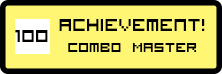
<style>
.page{position:relative;width:222px;height:74px;background:#fff774}
.page>*{position:absolute;margin:0}
.t1{font:23px "VisitorTT1BRK";color:#000000}
.t2{font:18px "VisitorTT1BRK";color:#000000}
</style>
<div class="page">
<p class="t1" style="left:15px;top:30px;width:33px;height:12px">100</p>
<p class="t1" style="left:59px;top:19px;width:146px;height:33px;text-align:center">achievement!<br><span class="t2">Combo Master</span></p>
</div>
